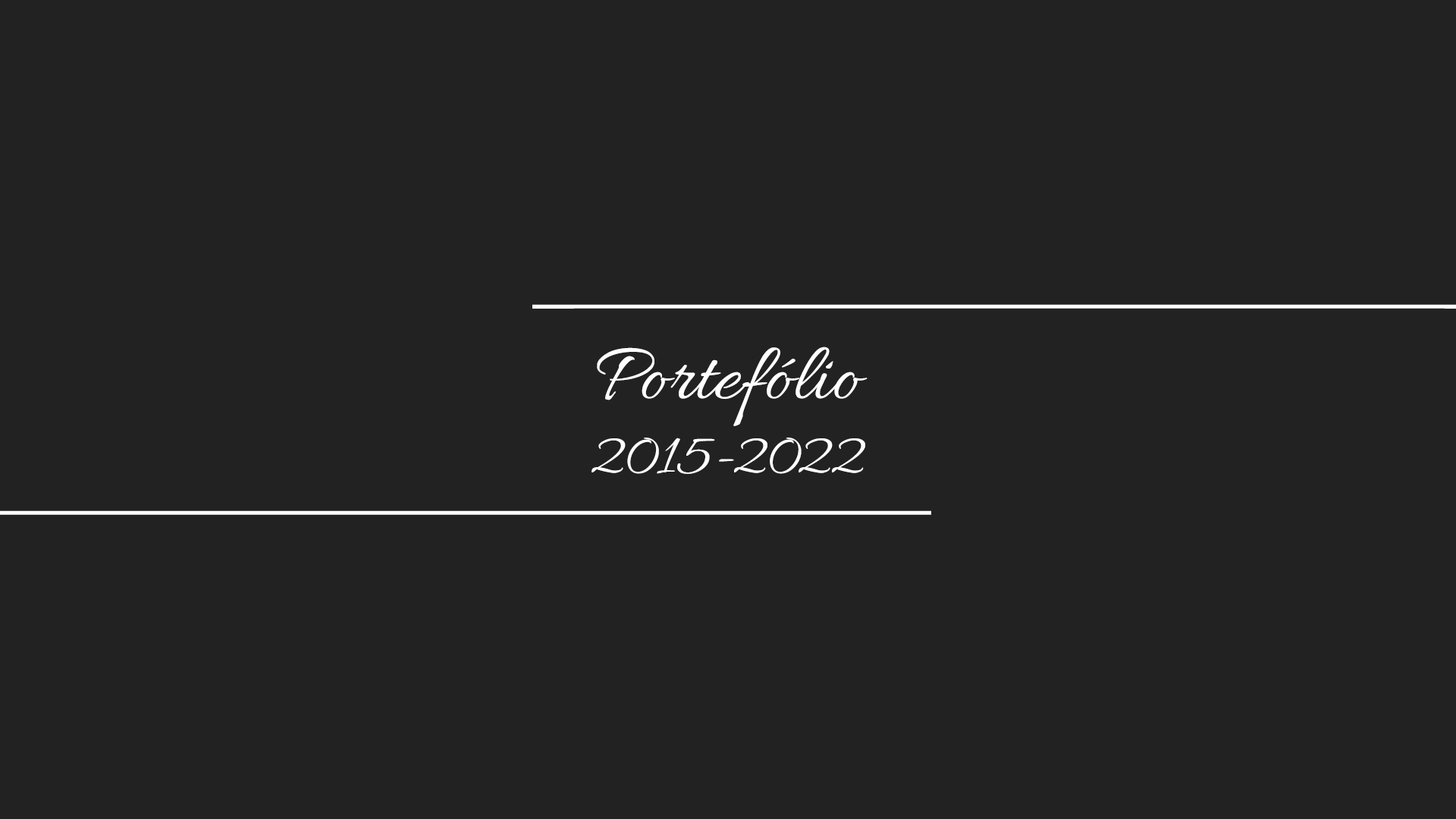
<style>
.page{position:relative;width:1456px;height:819px;background:#222222}
.page>*{position:absolute;margin:0}
.t1{font:83.4px "Allura-Regular";color:#ffffff}
.t2{font:62.2px "Allura-Regular";color:#ffffff}
</style>
<div class="page">
<p class="t1" style="left:591px;top:347px;width:277px;height:127px;text-align:center">Portefólio<br><span class="t2">2015-2022</span></p>
</div>
